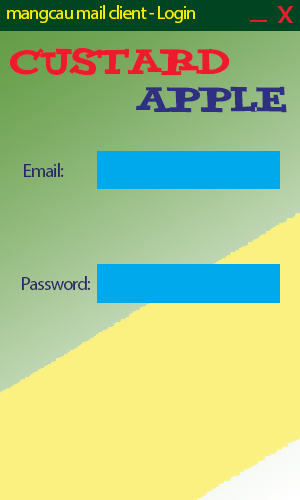
<style>
.page{position:relative;width:300px;height:500px;background:#faf180}
.page>*{position:absolute;margin:0}
.t1{font:18.7px "MyriadPro-Regular";letter-spacing:-0.05em;color:#fff200}
.t2{font:40px "VNI-Yahoo";letter-spacing:-0.05em;color:#ed1b2e}
.t3{font:40px "VNI-Yahoo";letter-spacing:-0.05em;color:#2f3082}
</style>
<div class="page">
<p class="t1" style="left:7px;top:5px;width:188px;height:18px">mangcau mail client - Login</p>
<p class="t2" style="left:10px;top:48px;width:220px;height:28px">CusTard</p>
<p class="t3" style="left:136px;top:86px;width:151px;height:27px">Apple</p>
</div>
